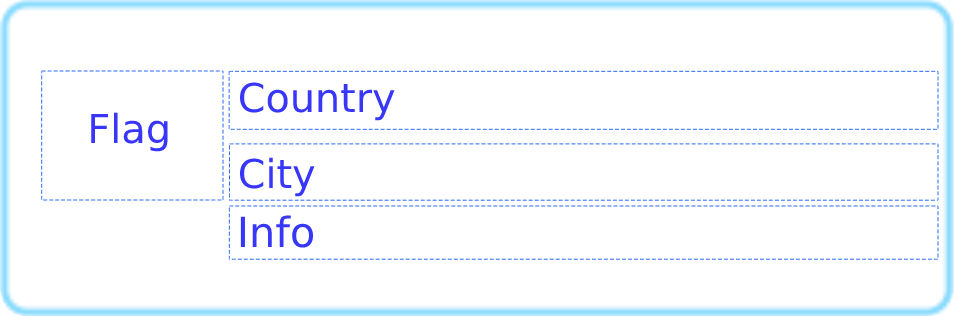
<style>
.page{position:relative;width:954px;height:316px;background:#ffffff}
.page>*{position:absolute;margin:0}
.t1{font:39.7px "DejaVuSans";color:#3837f9}
.t2{font:39.9px "DejaVuSans";color:#3837f9}
.t3{font:41.5px "DejaVuSans";color:#3837f9}
</style>
<div class="page">
<p class="t1" style="left:240px;top:82px;width:155px;height:39px">Country</p>
<p class="t2" style="left:91px;top:112px;width:77px;height:40px">Flag</p>
<p class="t1" style="left:240px;top:157px;width:75px;height:40px">City</p>
<p class="t3" style="left:240px;top:215px;width:73px;height:33px">Info</p>
</div>
